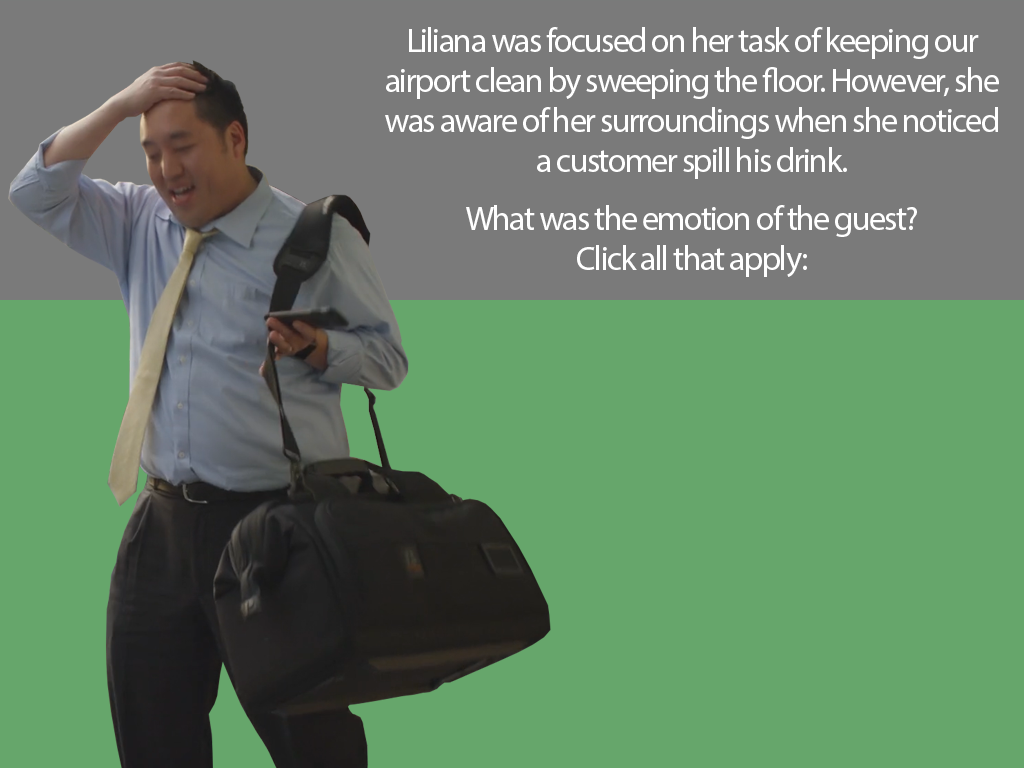
<style>
.page{position:relative;width:1024px;height:768px;background:#66a66b}
.page>*{position:absolute;margin:0}
.t1{font:34px/40px "MyriadPro-Regular";letter-spacing:-0.05em;color:#ffffff}
</style>
<div class="page">
<p class="t1" style="left:385px;top:27px;width:614px;height:250px;text-align:center">Liliana was focused on her task of keeping our airport clean by sweeping the floor. However, she was aware of her surroundings when she noticed a customer spill his drink.<br><br>What was the emotion of the guest?<br>Click all that apply:</p>
</div>
